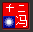
<style>
.page{position:relative;width:33px;height:32px;background:#f20000}
.page>*{position:absolute;margin:0}
.t1{font:10.4px "SimSun";color:#ffffff}
.t2{font:11.7px "SimSun";color:#ffffff}
</style>
<div class="page">
<p class="t1" style="left:6px;top:4px;width:19px;height:8px">十二</p>
<p class="t2" style="left:16px;top:15px;width:11px;height:12px">冯</p>
</div>
